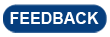
<style>
.page{position:relative;width:110px;height:37px;background:#053e7e}
.page>*{position:absolute;margin:0}
.t1{font:16px "Arial-BoldMT";color:#ffffff}
</style>
<div class="page">
<p class="t1" style="left:10px;top:12px;width:89px;height:12px">FEEDBACK</p>
</div>
